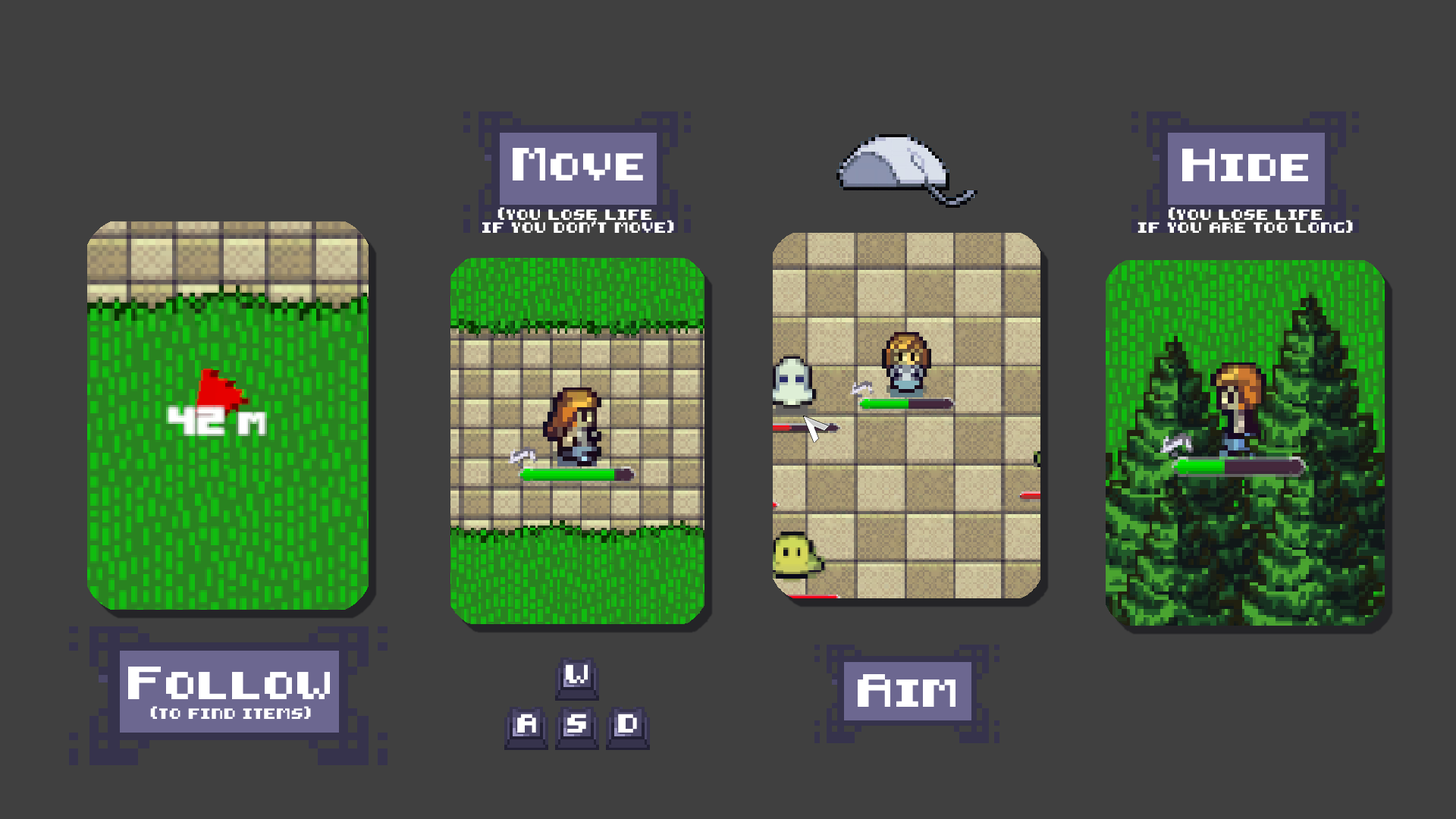
<style>
.page{position:relative;width:1456px;height:819px;background:#404040}
.page>*{position:absolute;margin:0}
.t1{font:27.1px "8-bit-HUD";color:#ffffff}
.t2{font:27.2px "8-bit-HUD";color:#ffffff}
.t3{font:10.5px "8-bit-HUD";color:#ffffff}
.t4{font:18.3px "8-bit-HUD";color:#ffffff}
</style>
<div class="page">
<p class="t1" style="left:513px;top:148px;width:130px;height:32px">Move</p>
<p class="t2" style="left:1182px;top:149px;width:126px;height:32px">Hide</p>
<p class="t3" style="left:482px;top:207px;width:192px;height:26px;text-align:center">(you lose life <br>if you don’t move)</p>
<p class="t3" style="left:1137px;top:207px;width:216px;height:26px;text-align:center">(you lose life<br>if you are too long)</p>
<p class="t4" style="left:566px;top:664px;width:22px;height:19px">w</p>
<p class="t2" style="left:128px;top:667px;width:202px;height:32px">Follow</p>
<p class="t2" style="left:858px;top:674px;width:97px;height:33px">Aim</p>
<p class="t3" style="left:150px;top:706px;width:161px;height:13px">(to find items)</p>
<p class="t4" style="left:517px;top:714px;width:19px;height:19px">a</p>
<p class="t4" style="left:567px;top:714px;width:19px;height:19px">s</p>
<p class="t4" style="left:618px;top:714px;width:19px;height:19px">d</p>
</div>
